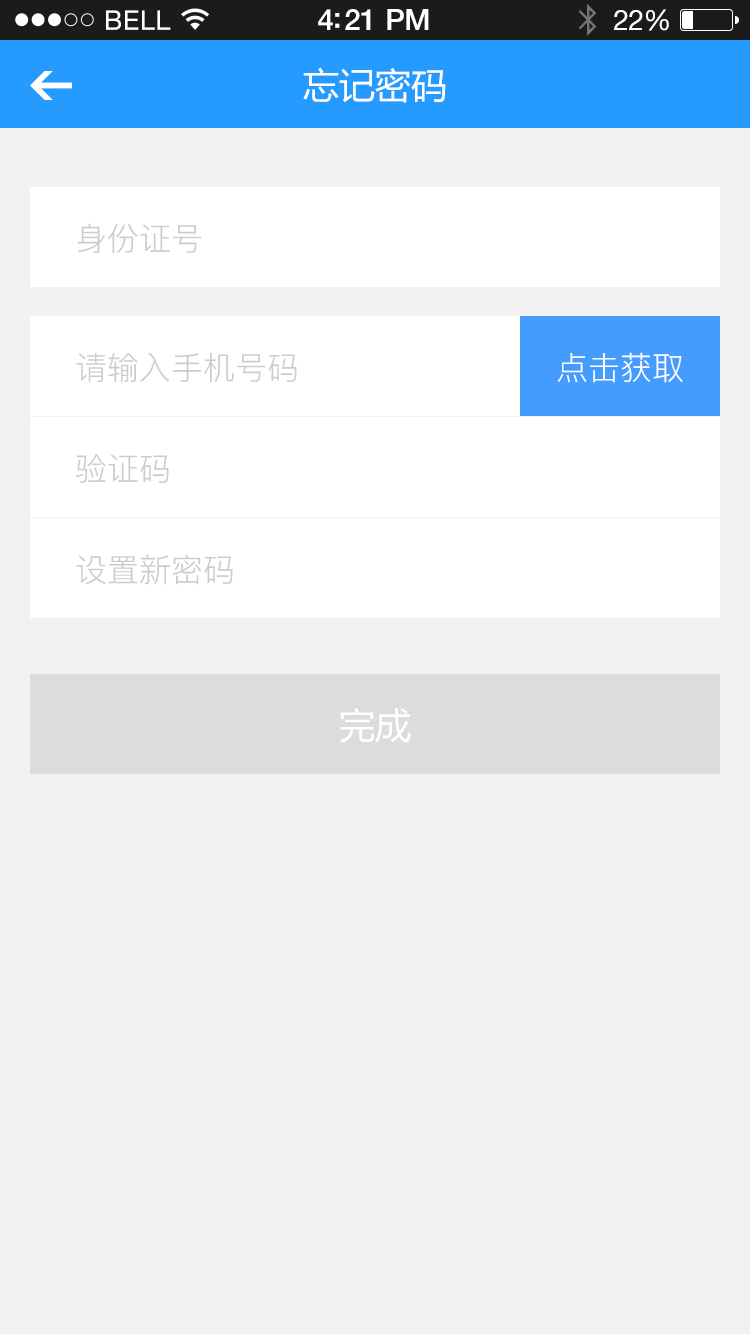
<style>
.page{position:relative;width:750px;height:1334px;background:#f2f2f2}
.page>*{position:absolute;margin:0}
.t1{font:36px "MicrosoftYaHei";color:#ffffff}
.t2{font:32px "PingFang-SC-Regular";color:#cccccc}
.t3{font:32px "PingFang-SC-Regular";color:#ffffff}
</style>
<div class="page">
<p class="t1" style="left:303px;top:67px;width:143px;height:36px">忘记密码</p>
<p class="t2" style="left:77px;top:223px;width:125px;height:31px">身份证号</p>
<p class="t2" style="left:76px;top:352px;width:221px;height:31px">请输入手机号码</p>
<p class="t3" style="left:557px;top:352px;width:126px;height:31px">点击获取</p>
<p class="t2" style="left:76px;top:454px;width:93px;height:29px">验证码</p>
<p class="t2" style="left:76px;top:554px;width:157px;height:31px">设置新密码</p>
<p class="t1" style="left:339px;top:708px;width:72px;height:35px">完成</p>
</div>
